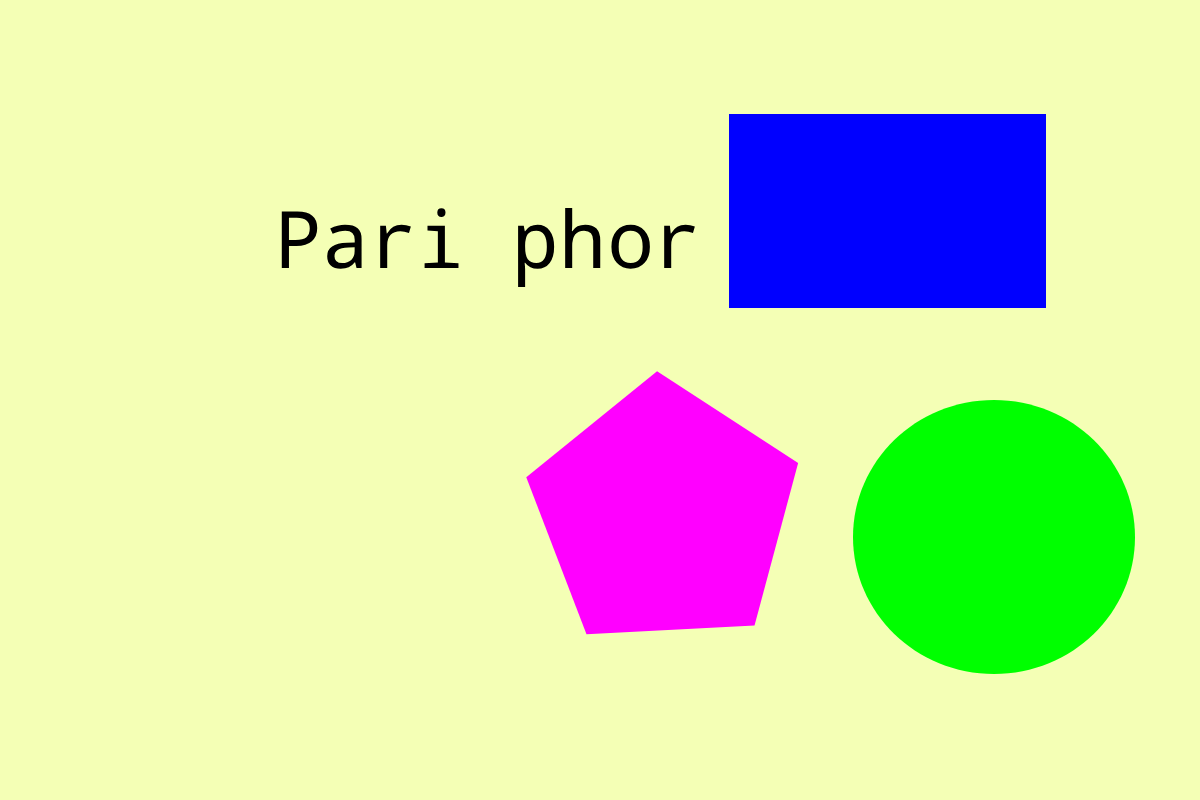
<style>
.page{position:relative;width:1200px;height:800px;background:#f4ffb5}
.page>*{position:absolute;margin:0}
.t1{font:79px "DroidSansMono";color:#000000}
</style>
<div class="page">
<p class="t1" style="left:281px;top:207px;width:414px;height:80px">Pari phor</p>
</div>
